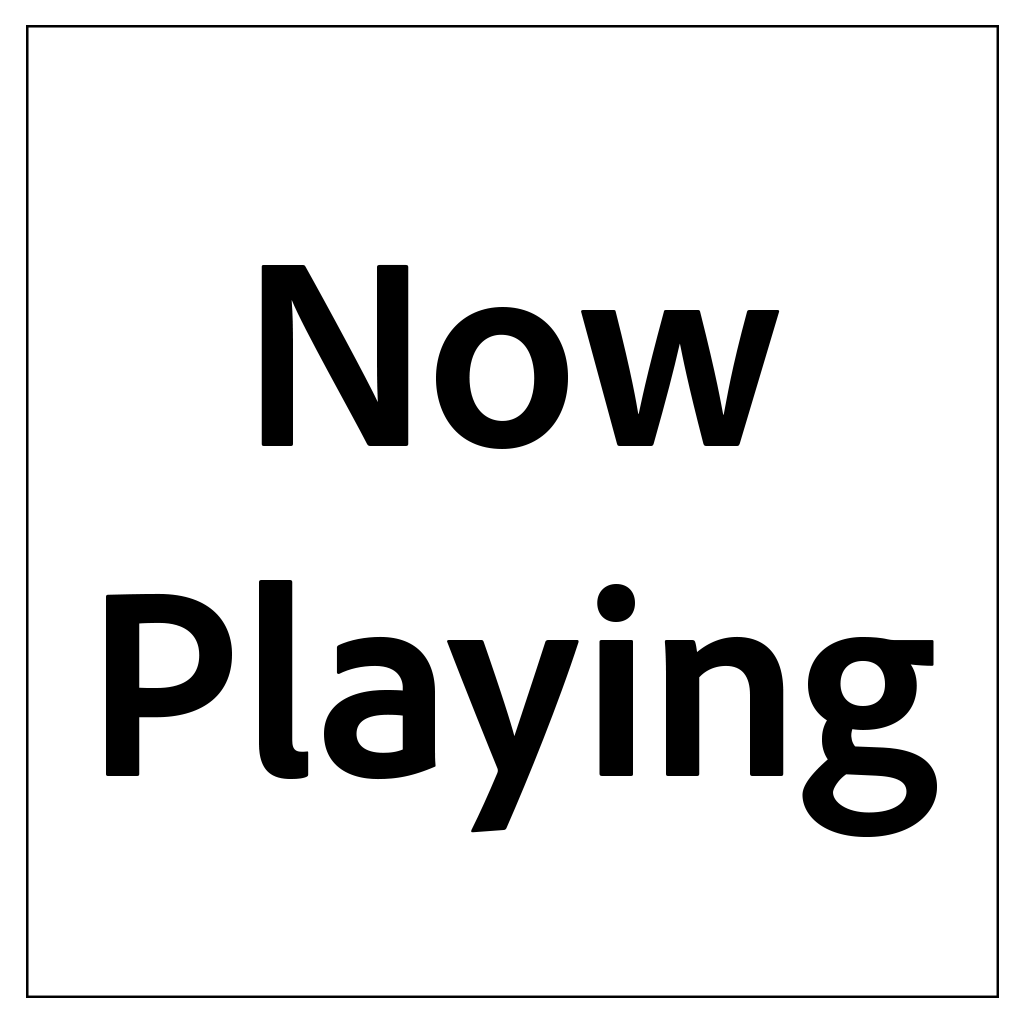
<style>
.page{position:relative;width:1024px;height:1024px;background:#ffffff}
.page>*{position:absolute;margin:0}
.t1{font:275px "AdobeClean-Bold";color:#000000}
</style>
<div class="page">
<p class="t1" style="left:106px;top:264px;width:831px;height:573px;text-align:center">Now<br>Playing</p>
</div>
